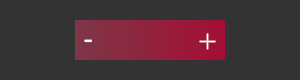
<style>
.page{position:relative;width:300px;height:80px;background:#333333}
.page>*{position:absolute;margin:0}
.t1{font:30px "Baskerville";color:#ffffff}
</style>
<div class="page">
<p class="t1" style="left:84px;top:39px;width:8px;height:4px">-</p>
<p class="t1" style="left:199px;top:33px;width:17px;height:17px">+</p>
</div>
